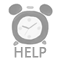
<style>
.page{position:relative;width:60px;height:60px;background:#ffffff}
.page>*{position:absolute;margin:0}
.t1{font:14.1px "NirmalaUI";color:#999999;font-weight:bold}
</style>
<div class="page">
<p class="t1" style="left:14px;top:47px;width:33px;height:11px">HELP</p>
</div>
